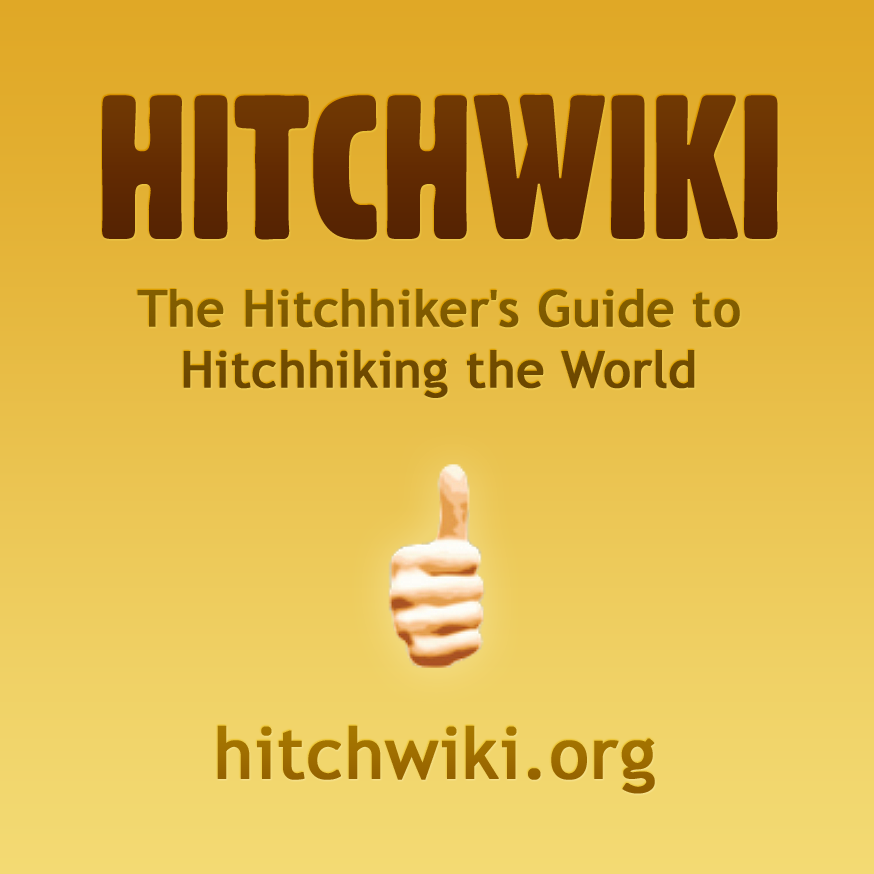
<style>
.page{position:relative;width:874px;height:874px}
.page>*{position:absolute;margin:0}
.t1{font:199.8px "Gothic821CondensedBT-Regular";color:#632b02;text-transform:uppercase}
.t2{font:50.3px "TrebuchetMS";color:#785200;font-weight:bold}
.t3{font:71.1px "TrebuchetMS";color:#9d6b00;font-weight:bold}
</style>
<div class="page">
<p class="t1" style="left:102px;top:94px;width:676px;height:146px">Hitchwiki</p>
<p class="t2" style="left:137px;top:289px;width:603px;height:109px;text-align:center">The Hitchhiker's Guide to<br>Hitchhiking the World</p>
<p class="t3" style="left:217px;top:725px;width:438px;height:69px">hitchwiki.org</p>
</div>
